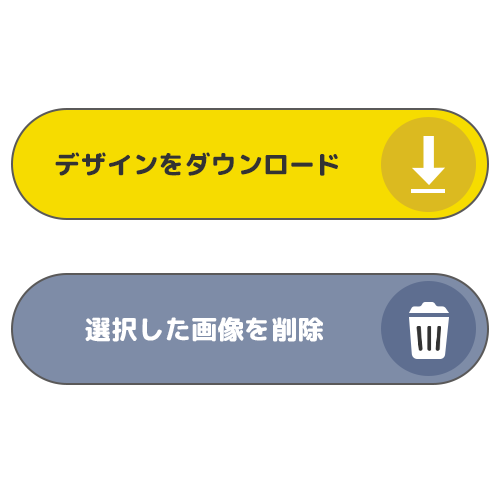
<style>
.page{position:relative;width:500px;height:500px;background:#ffffff}
.page>*{position:absolute;margin:0}
.t1{font:26px "RoundedMplus1c-ExtraBold";color:#333333}
.t2{font:26.6px "RoundedMplus1c-ExtraBold";color:#ffffff}
</style>
<div class="page">
<p class="t1" style="left:55px;top:152px;width:283px;height:24px">デザインをダウンロード</p>
<p class="t2" style="left:85px;top:317px;width:238px;height:25px">選択した画像を削除</p>
</div>
